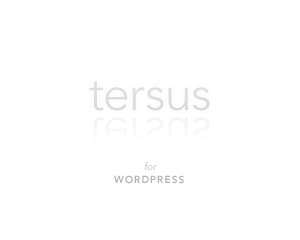
<style>
.page{position:relative;width:300px;height:240px;background:#ffffff}
.page>*{position:absolute;margin:0}
.t1{font:48px "Avenir-Light";color:#dcdcdc}
.t2{font:10px "Avenir-LightOblique"}
.t3{font:10px "Avenir-Heavy";letter-spacing:0.1em;color:#b2b2b2}
</style>
<div class="page">
<p class="t1" style="left:89px;top:81px;width:121px;height:30px">tersus</p>
<p class="t2" style="left:144px;top:162px;width:13px;height:9px">for</p>
<p class="t3" style="left:114px;top:175px;width:70px;height:9px">WORDPRESS</p>
</div>
